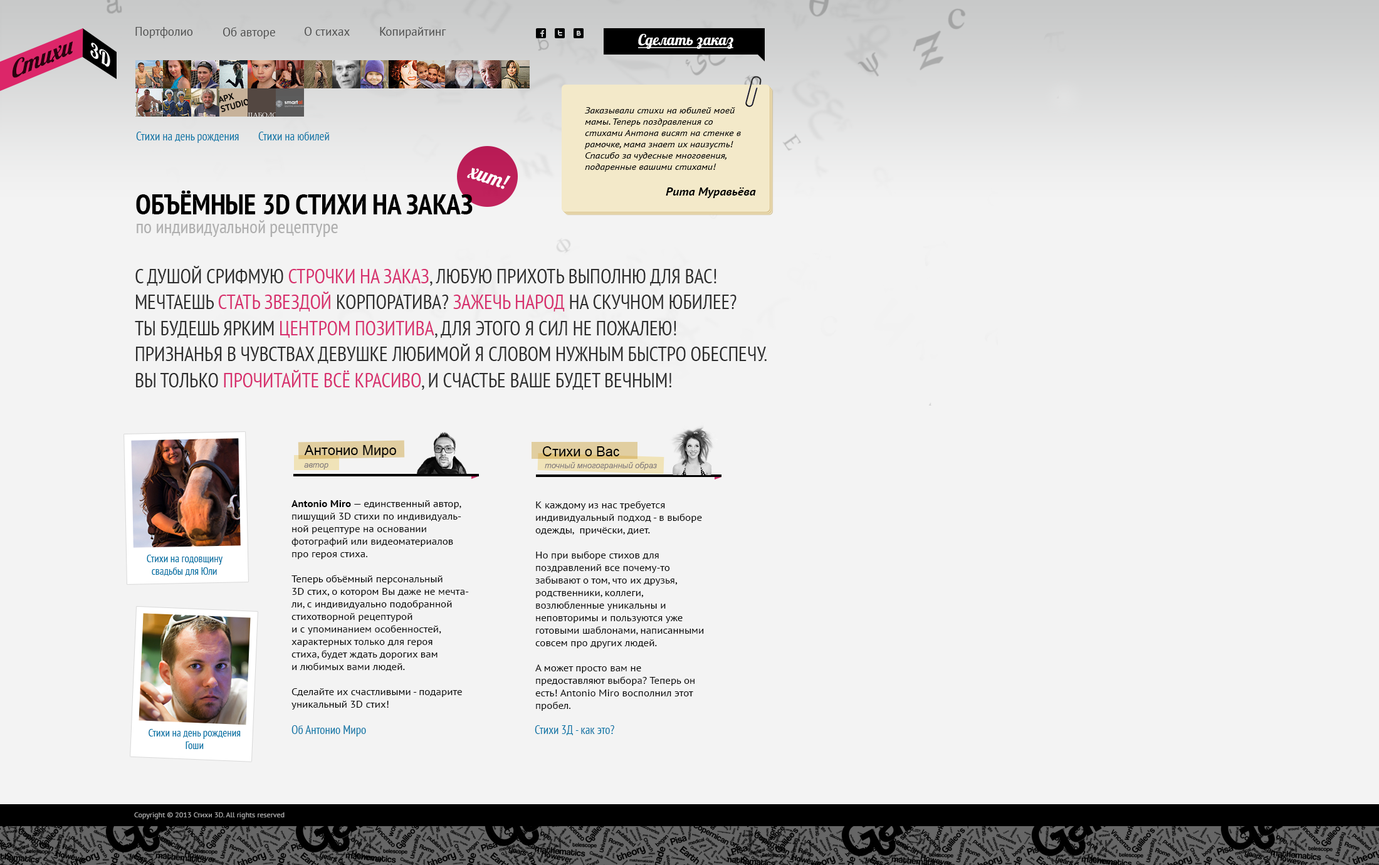
<style>
.page{position:relative;width:1379px;height:865px;background:#f3f3f3}
.page>*{position:absolute;margin:0}
.t1{font:11.9px "PTSans-Regular";color:#4c4d4d}
.t2{font:23.4px "Lobster";color:#2b030f;scale:1.09 1}
.t3{font:15px "Lobster";color:#ffffff;text-decoration:underline}
.t4{font:20.9px "Lobster";letter-spacing:0.05em;color:#ffffff;scale:0.94 1}
.t5{font:9px/11.3px "PTSans-Italic";color:#000000;scale:1.11 1}
.t6{font:11.9px "PTSans-Narrow";color:#0073a5}
.t7{font:20.5px "Lobster";color:#ffffff}
.t8{font:28.2px "PTSans-NarrowBold";color:#000000;text-transform:uppercase}
.t9{font:11.3px "PTSans-BoldItalic";color:#000000;scale:1.11 1}
.t10{font:18.8px "PTSans-Narrow";color:#afafaf}
.t11{font:19.9px/26px "PTSans-Narrow";color:#2d2d2d;text-transform:uppercase}
.t12{font:19.9px/26px "PTSans-Narrow";color:#d7316e;text-transform:uppercase}
.t13{font:13.8px "ArialMT";color:#000000}
.t14{font:8.1px "Arial-ItalicMT";color:#867e7e}
.t15{font:9.6px/12.5px "PTSans-Regular";color:#000000;scale:1.11 1}
.t16{font:9.6px/12.5px "PTSans-Bold";color:#000000;scale:1.11 1}
.t17{font:10.7px/12.5px "PTSans-Narrow";color:#0073a5}
.t18{font:7.5px "PTSans-Regular";color:#a3a3a3}
</style>
<div class="page">
<p class="t1" style="left:135px;top:27px;width:58px;height:11px">Портфолио</p>
<p class="t1" style="left:223px;top:27px;width:52px;height:12px">Об авторе</p>
<p class="t1" style="left:305px;top:27px;width:45px;height:9px">О стихах</p>
<p class="t1" style="left:380px;top:27px;width:66px;height:11px">Копирайтинг</p>
<p class="t2" style="left:12px;top:41px;width:61px;height:37px;rotate:-23deg">Стихи</p>
<p class="t3" style="left:638px;top:34px;width:95px;height:15px">Сделать заказ</p>
<p class="t4" style="left:90px;top:43px;width:20px;height:24px;rotate:33deg">3D</p>
<p class="t5" style="left:584px;top:107px;width:157px;height:65px">Заказывали стихи на юбилей моей мамы. Теперь поздравления со стихами Антона висят на стенке в рамочке, мама знает их наизусть! Спасибо за чудесные многовения, подаренные вашими стихами!</p>
<p class="t6" style="left:136px;top:132px;width:103px;height:11px">Стихи на день рождения</p>
<p class="t6" style="left:258px;top:132px;width:71px;height:8px">Стихи на юбилей</p>
<p class="t7" style="left:467px;top:167px;width:44px;height:22px;rotate:18deg">хит!</p>
<p class="t8" style="left:136px;top:191px;width:337px;height:23px">объёмные 3D Стихи на заказ</p>
<p class="t9" style="left:666px;top:187px;width:90px;height:11px">Рита Муравьёва</p>
<p class="t10" style="left:137px;top:220px;width:201px;height:17px">по индивидуальной рецептуре</p>
<p class="t11" style="left:135px;top:266px;width:631px;height:124px">С душой срифмую <span class="t12">строчки на заказ</span>, Любую прихоть выполню для Вас! Мечтаешь <span class="t12">стать звездой </span>корпоратива? <span class="t12">Зажечь народ </span>на скучном юбилее? <br>Ты будешь ярким <span class="t12">центром позитива</span>, Для этого я сил не пожалею! <br>Признанья в чувствах девушке любимой Я словом нужным быстро обеспечу. Вы только <span class="t12">прочитайте всё красиво</span>, И счастье ваше будет вечным! <br>И кровь бежать по венам вспять, Увидев искру восхищения во взгляде милом.</p>
<p class="t13" style="left:304px;top:445px;width:92px;height:12px">Антонио Миро</p>
<p class="t13" style="left:542px;top:446px;width:77px;height:10px">Стихи о Вас</p>
<p class="t14" style="left:545px;top:462px;width:112px;height:8px">точный многогранный образ</p>
<p class="t14" style="left:304px;top:463px;width:24px;height:6px">автор</p>
<p class="t15" style="left:291px;top:500px;width:178px;height:209px"><span class="t16">Antonio Miro</span> — единственный автор, пишущий 3D стихи по индивидуальной рецептуре на основании <br>фотографий или видеоматериалов <br>про героя стиха.<br><br>Теперь объёмный персональный<br>3D стих, о котором Вы даже не мечтали, с индивидуально подобранной <br>стихотворной рецептурой <br>и с упоминанием особенностей, <br>характерных только для героя<br>стиха, будет ждать дорогих вам <br>и любимых вами людей.<br><br>Сделайте их счастливыми - подарите уникальный 3D стих!</p>
<p class="t15" style="left:535px;top:501px;width:169px;height:210px">К каждому из нас требуется индивидуальный подход - в выборе одежды,  причёски, диет.  <br><br>Но при выборе стихов для поздравлений все почему-то забывают о том, что их друзья, родственники, коллеги, возлюбленные уникальны и неповторимы и пользуются уже готовыми шаблонами, написанными совсем про других людей.<br><br>А может просто вам не предоставляют выбора? Теперь он есть! Antonio Miro восполнил этот пробел.</p>
<p class="t17" style="left:147px;top:555px;width:75px;height:21px;text-align:center">Стихи на годовщину<br>свадьбы для Юли</p>
<p class="t6" style="left:291px;top:725px;width:75px;height:11px">Об Антонио Миро</p>
<p class="t6" style="left:535px;top:725px;width:79px;height:10px">Стихи 3Д - как это?</p>
<p class="t17" style="left:149px;top:729px;width:92px;height:20px;text-align:center">Стихи на день рождения<br>Гоши</p>
<p class="t18" style="left:134px;top:812px;width:151px;height:7px">Copyright © 2013 Стихи 3D. All rights reserved</p>
</div>
